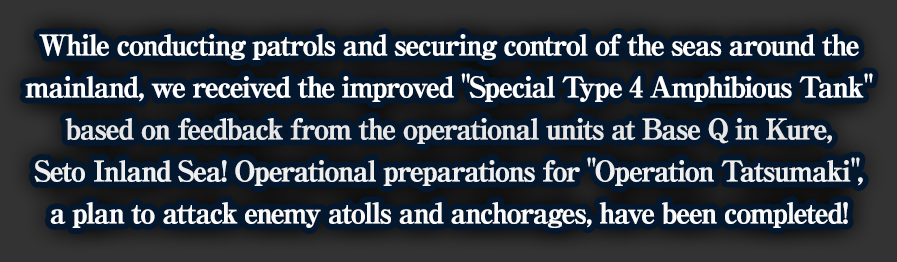
<style>
.page{position:relative;width:897px;height:262px;background:#03172f}
.page>*{position:absolute;margin:0}
.t1{font:28px/42px "RyuminPro-ExBold";letter-spacing:-0.08em;color:#ffffff;font-weight:bold}
</style>
<div class="page">
<p class="t1" style="left:25px;top:34px;width:848px;height:194px;text-align:center">While conducting patrols and securing control of the seas around the<br>mainland, we received the improved "Special Type 4 Amphibious Tank"<br>based on feedback from the operational units at Base Q in Kure,<br>Seto Inland Sea! Operational preparations for "Operation Tatsumaki",<br>a plan to attack enemy atolls and anchorages, have been completed!</p>
</div>
